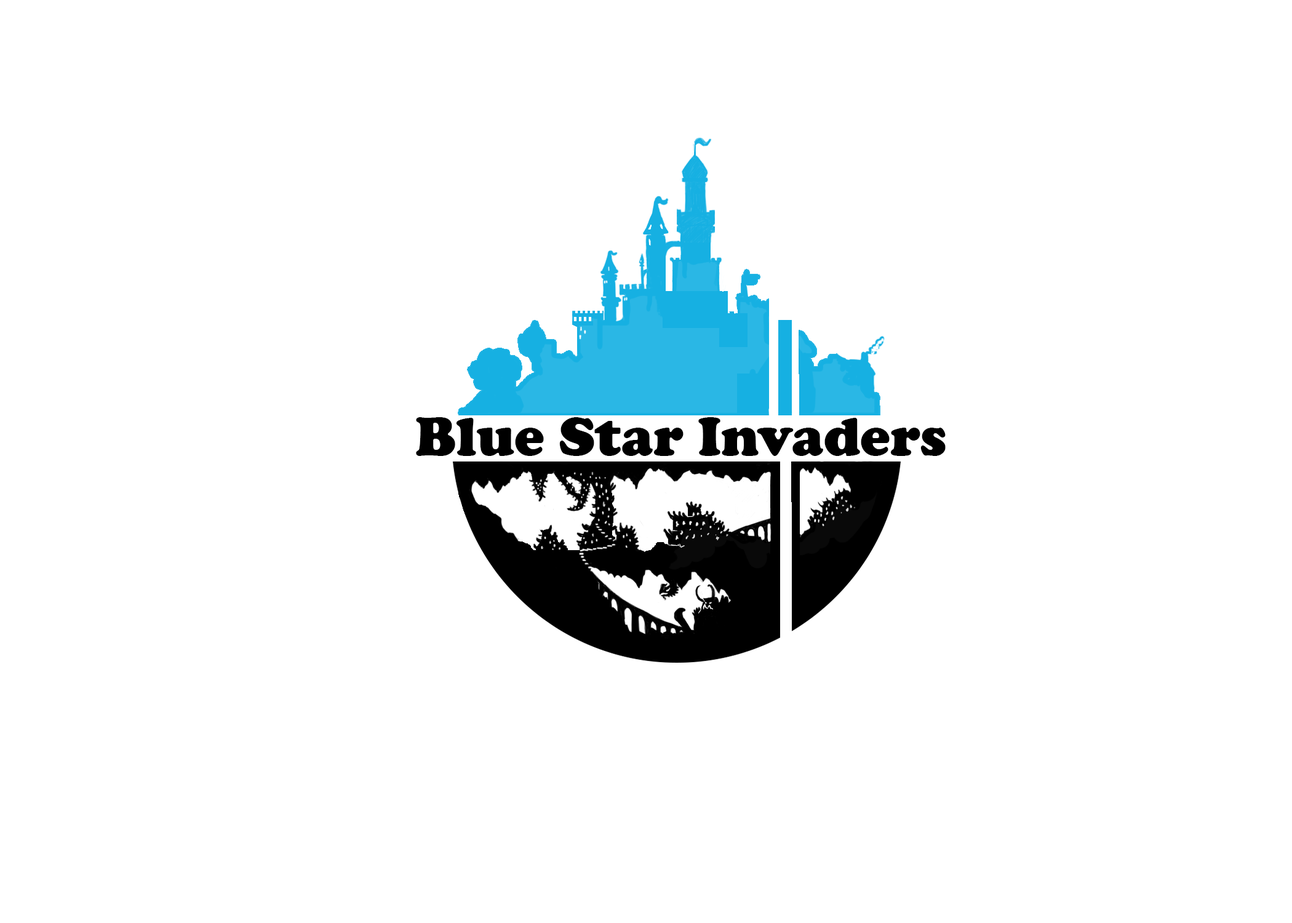
<style>
.page{position:relative;width:1292px;height:923px;background:#ffffff}
.page>*{position:absolute;margin:0}
.t1{font:56.4px "CooperBlack";color:#000000}
</style>
<div class="page">
<p class="t1" style="left:416px;top:417px;width:530px;height:39px">Blue Star Invaders</p>
</div>
